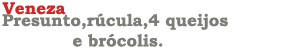
<style>
.page{position:relative;width:300px;height:50px;background:#ffffff}
.page>*{position:absolute;margin:0}
.t1{font:17px "BookmanOldStyle-Bold";color:#d42525}
.t2{font:17px "BookmanOldStyle-Bold";color:#7c7c79}
</style>
<div class="page">
<p class="t1" style="left:2px;top:2px;width:64px;height:13px">Veneza</p>
<p class="t2" style="left:2px;top:13px;width:226px;height:34px;text-align:center">Presunto,rúcula,4 queijos <br>e brócolis.</p>
</div>
